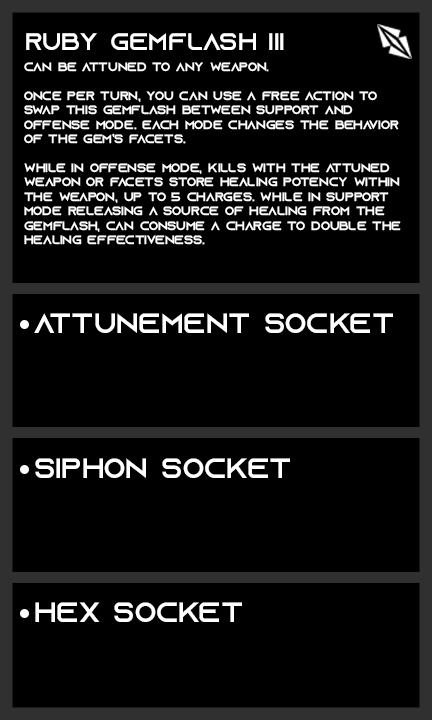
<style>
.page{position:relative;width:432px;height:720px;background:#000000}
.page>*{position:absolute;margin:0}
.t1{font:24px "AzonixRegular";color:#ffffff}
.t2{font:12px "AzonixRegular";color:#ffffff}
.t3{font:28px "AzonixRegular";color:#ffffff}
</style>
<div class="page">
<p class="t1" style="left:26px;top:33px;width:258px;height:17px">ruby gemflash IIi</p>
<p class="t2" style="left:24px;top:62px;width:377px;height:183px">can be attuned to any weapon.<br><br>once per turn, you can use a free action to <br>swap this gemflash between support and <br>offense mode. each mode changes the behavior <br>of the gem’s facets.<br><br>while in offense mode, kills with the attuned <br>weapon or facets store healing potency within<br>the weapon, up to 5 charges. while in support <br>mode releasing a source of healing from the <br>gemflash, can consume a charge to double the <br>healing effectiveness.</p>
<p class="t3" style="left:34px;top:313px;width:359px;height:20px">attunement socket</p>
<p class="t3" style="left:35px;top:458px;width:255px;height:20px">siphon socket</p>
<p class="t3" style="left:35px;top:602px;width:207px;height:20px">hex socket</p>
</div>
